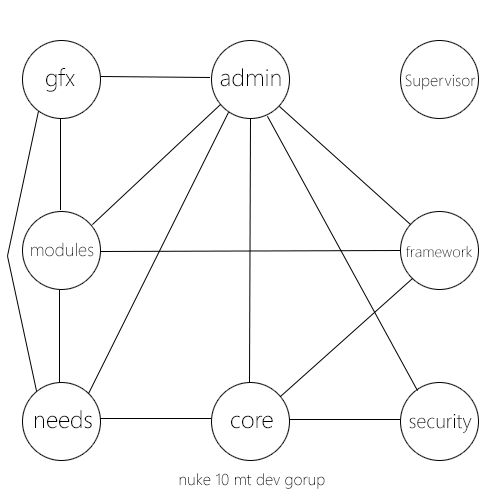
<style>
.page{position:relative;width:500px;height:500px;background:#ffffff}
.page>*{position:absolute;margin:0}
.t1{font:24px "SegoeUI-Light";color:#000000}
.t2{font:16px "SegoeUI-Light"}
.t3{font:18px "SegoeUI-Light"}
.t4{font:15px "SegoeUI-Light";color:#000000}
.t5{font:20px "SegoeUI-Light";color:#000000}
.t6{font:16px "SegoeUI-Light";color:#000000}
</style>
<div class="page">
<p class="t1" style="left:46px;top:68px;width:29px;height:24px">gfx</p>
<p class="t1" style="left:220px;top:68px;width:61px;height:19px">admin</p>
<p class="t2" style="left:405px;top:74px;width:71px;height:16px">Supervisor</p>
<p class="t3" style="left:31px;top:242px;width:63px;height:15px">modules</p>
<p class="t4" style="left:406px;top:246px;width:66px;height:12px">framework</p>
<p class="t1" style="left:35px;top:410px;width:57px;height:19px">needs</p>
<p class="t5" style="left:409px;top:414px;width:63px;height:19px">security</p>
<p class="t1" style="left:231px;top:415px;width:42px;height:14px">core</p>
<p class="t6" style="left:179px;top:473px;width:146px;height:16px">nuke 10 mt dev gorup</p>
</div>
